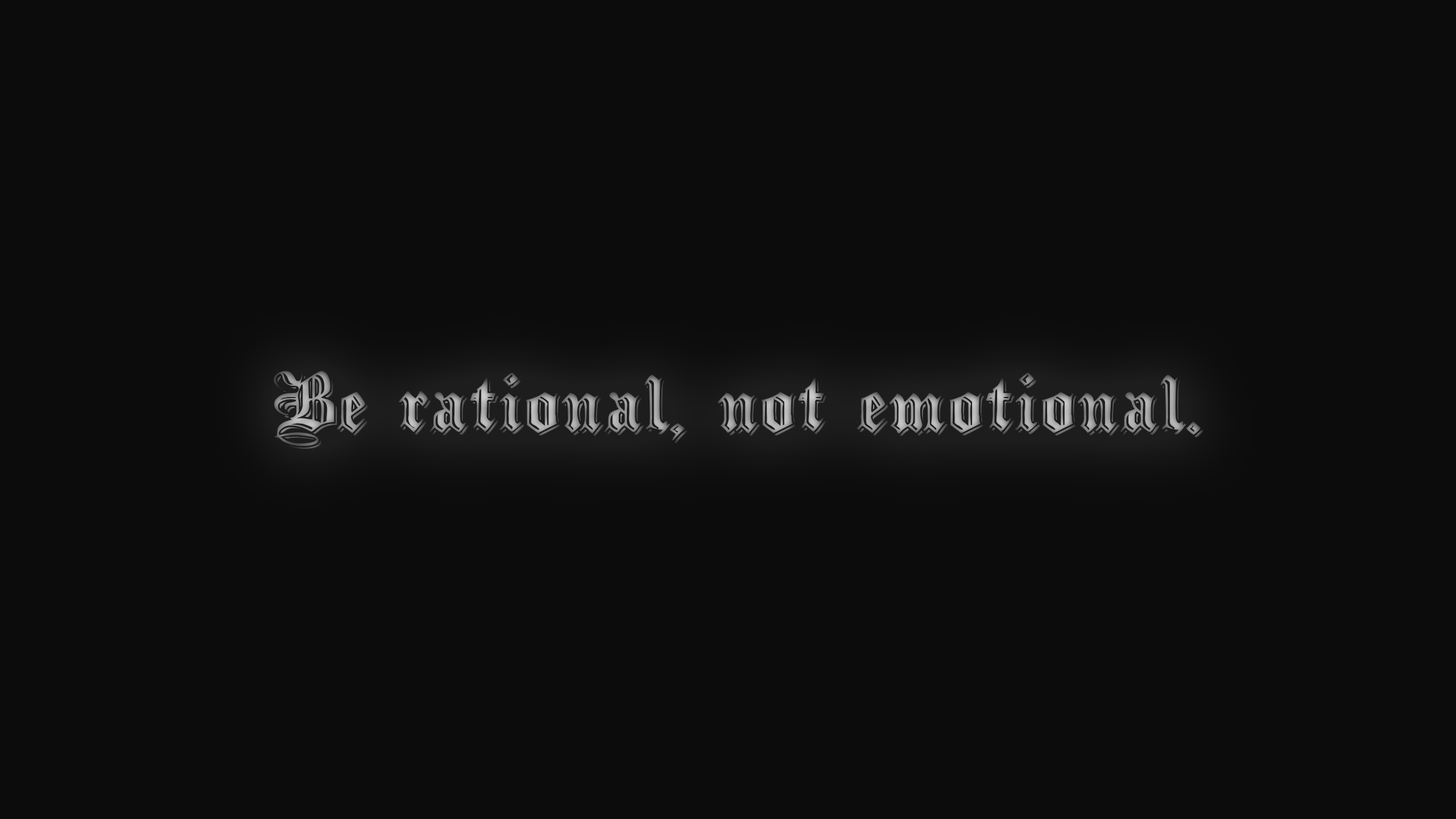
<style>
.page{position:relative;width:1456px;height:819px;background:#0c0c0c}
.page>*{position:absolute;margin:0}
.t1{font:68.2px "EmbossedBlackWide-Normal"}
</style>
<div class="page">
<p class="t1" style="left:274px;top:371px;width:929px;height:78px">Be rational, not emotional.</p>
</div>
